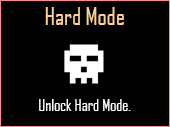
<style>
.page{position:relative;width:170px;height:127px;background:#000000}
.page>*{position:absolute;margin:0}
.t1{font:24px "AgencyFB-Reg";color:#ffd28c}
.t2{font:16px "AgencyFB-Reg";color:#ffffff}
</style>
<div class="page">
<p class="t1" style="left:45px;top:7px;width:79px;height:18px">Hard Mode</p>
<p class="t2" style="left:39px;top:99px;width:92px;height:12px">Unlock Hard Mode.</p>
</div>
